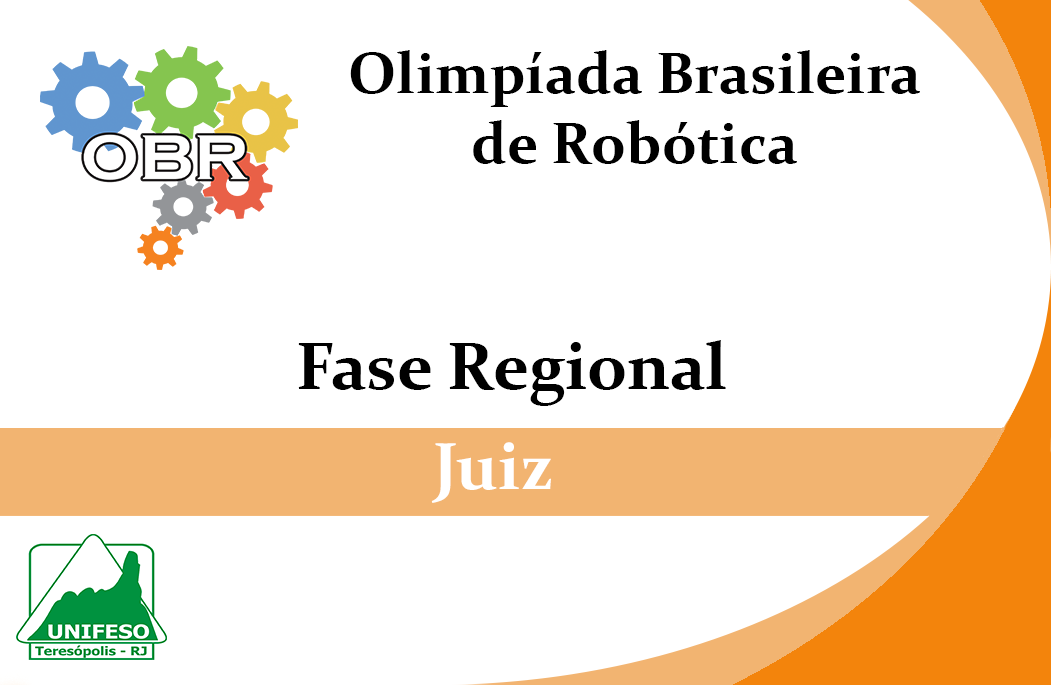
<style>
.page{position:relative;width:1051px;height:685px;background:#ffffff}
.page>*{position:absolute;margin:0}
.t1{font:58.3px "Constantia-Bold";color:#000000}
.t2{font:66.7px "Constantia-Bold";color:#000000}
.t3{font:66.7px "Constantia-Bold";color:#ffffff}
</style>
<div class="page">
<p class="t1" style="left:350px;top:50px;width:570px;height:114px;text-align:center">Olimpíada Brasileira<br>de Robótica</p>
<p class="t2" style="left:298px;top:340px;width:428px;height:66px">Fase Regional</p>
<p class="t3" style="left:431px;top:442px;width:120px;height:61px">Juiz</p>
</div>
